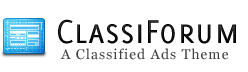
<style>
.page{position:relative;width:248px;height:72px;background:#ffffff}
.page>*{position:absolute;margin:0}
.t1{font:36px "Delicious-SmallCaps";letter-spacing:0.01em;color:#09090a}
.t2{font:14px "Georgia";letter-spacing:0.075em;color:#414040}
</style>
<div class="page">
<p class="t1" style="left:58px;top:19px;width:178px;height:25px">ClassiForum</p>
<p class="t2" style="left:60px;top:48px;width:169px;height:12px">A Classified Ads Theme</p>
</div>
